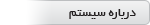
<style>
.page{position:relative;width:150px;height:25px}
.page>*{position:absolute;margin:0}
.t1{font:13.2px "BYekan";color:#231f20}
</style>
<div class="page">
<p class="t1" style="left:69px;top:9px;width:67px;height:10px">درباره سیستم</p>
</div>
